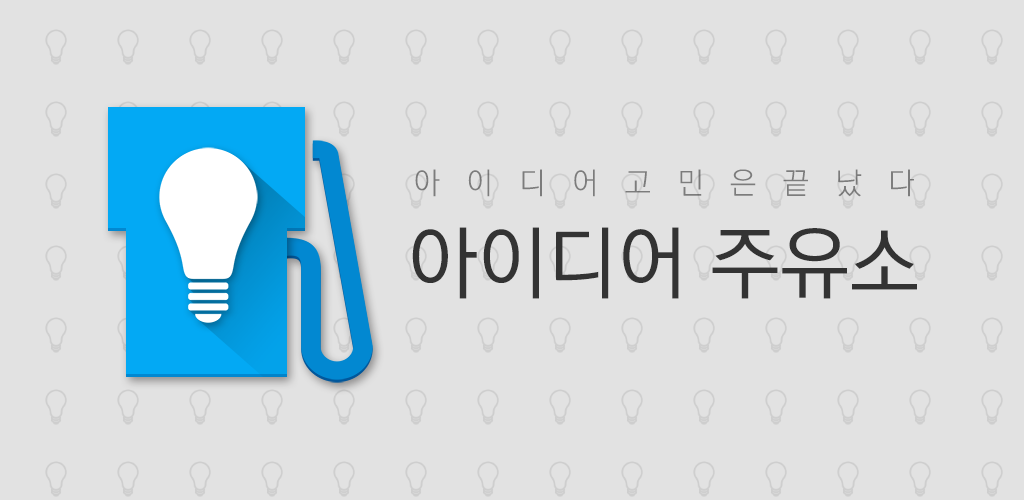
<style>
.page{position:relative;width:1024px;height:500px;background:#e2e2e2}
.page>*{position:absolute;margin:0}
.t1{font:30px "KoPubDotumLight";letter-spacing:0.885em;color:#7c7c7c}
.t2{font:80px "KoPubDotumMedium";color:#333333}
</style>
<div class="page">
<p class="t1" style="left:415px;top:169px;width:499px;height:28px">아이디어고민은끝났다</p>
<p class="t2" style="left:412px;top:227px;width:505px;height:72px">아이디어 주유소</p>
</div>
